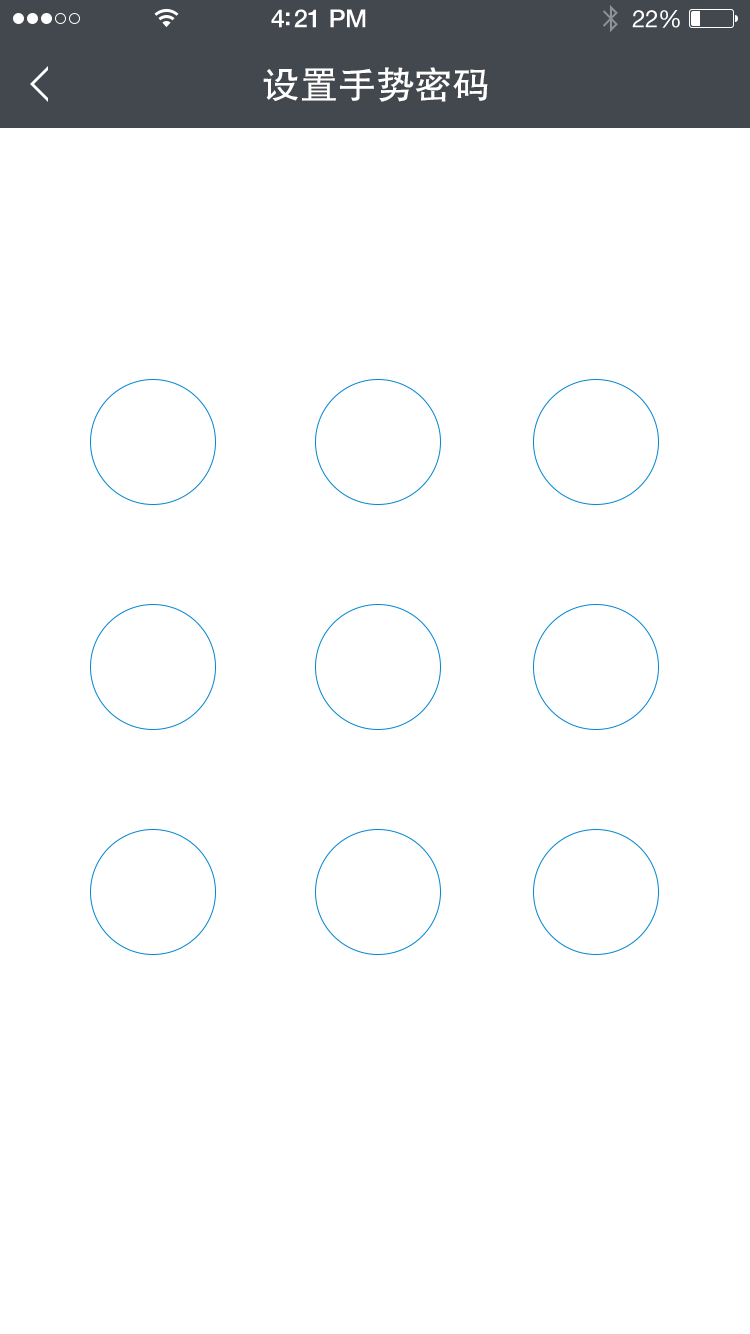
<style>
.page{position:relative;width:750px;height:1334px;background:#ffffff}
.page>*{position:absolute;margin:0}
.t1{font:38px "FZHTJW--GB1-0";color:#ffffff}
</style>
<div class="page">
<p class="t1" style="left:263px;top:67px;width:225px;height:35px">设置手势密码</p>
</div>
